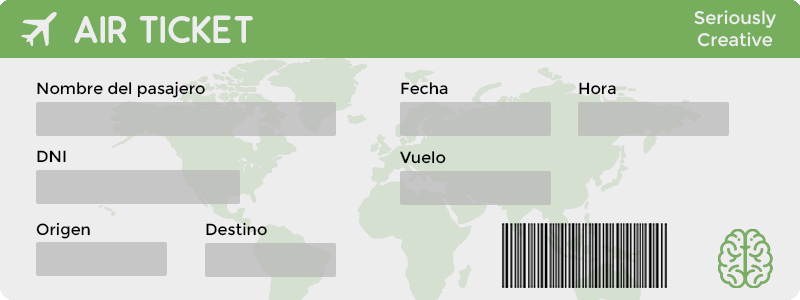
<style>
.page{position:relative;width:800px;height:300px;background:#ededed}
.page>*{position:absolute;margin:0}
.t1{font:39px "Odin-Bold";color:#ededed}
.t2{font:18px "Montserrat-Regular";color:#ededed}
.t3{font:16px "Montserrat-Regular";color:#000000}
</style>
<div class="page">
<p class="t1" style="left:74px;top:15px;width:179px;height:28px">AIR TICKET</p>
<p class="t2" style="left:694px;top:10px;width:82px;height:37px;text-align:center">Seriously<br>Creative</p>
<p class="t3" style="left:37px;top:81px;width:168px;height:17px">Nombre del pasajero</p>
<p class="t3" style="left:401px;top:82px;width:47px;height:13px">Fecha</p>
<p class="t3" style="left:579px;top:82px;width:37px;height:13px">Hora</p>
<p class="t3" style="left:37px;top:150px;width:29px;height:13px">DNI</p>
<p class="t3" style="left:400px;top:151px;width:46px;height:13px">Vuelo</p>
<p class="t3" style="left:36px;top:222px;width:54px;height:17px">Origen</p>
<p class="t3" style="left:206px;top:222px;width:61px;height:14px">Destino</p>
</div>
